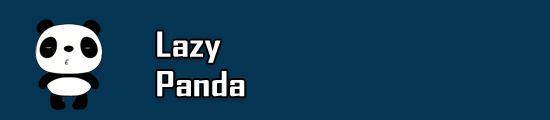
<style>
.page{position:relative;width:550px;height:120px;background:#043654}
.page>*{position:absolute;margin:0}
.t1{font:32.9px "AgencyFB-Bold";color:#ffffff;scale:1.33 1}
</style>
<div class="page">
<p class="t1" style="left:157px;top:31px;width:88px;height:66px">Lazy <br>Panda</p>
</div>
